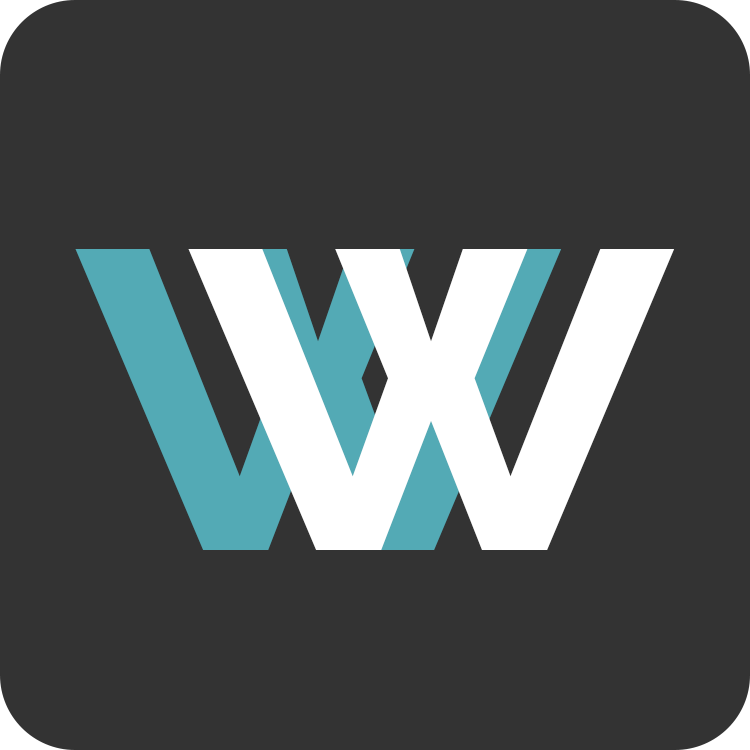
<style>
.page{position:relative;width:750px;height:750px;background:#333333}
.page>*{position:absolute;margin:0}
.t1{font:580px "RalewayRoman-Bold";color:#53aab5}
.t2{font:580px "RalewayRoman-Bold";color:#ffffff}
</style>
<div class="page">
<p class="t1" style="left:75px;top:249px;width:487px;height:301px">w</p>
<p class="t2" style="left:188px;top:249px;width:487px;height:301px">w</p>
</div>
